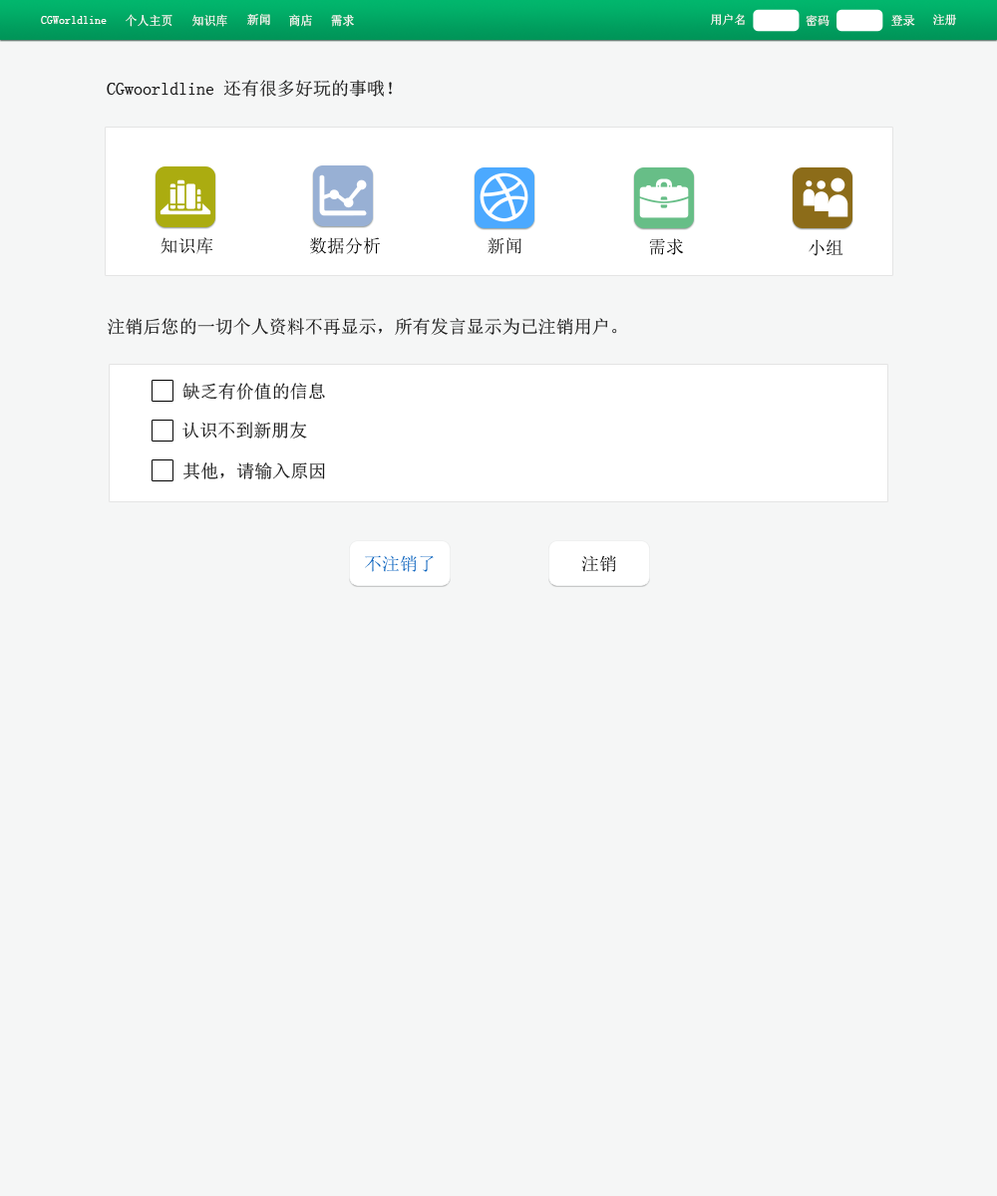
<style>
.page{position:relative;width:997px;height:1196px;background:#f5f6f6}
.page>*{position:absolute;margin:0}
.t1{font:12.4px "SimSun";color:#fdfcfc;scale:0.97 1}
.t2{font:12px "SimSun";color:#fdfcfc}
.t3{font:12px "SimSun";color:#ffffff}
.t4{font:17.9px "SimSun";color:#191919}
.t5{font:17.9px "SimSun";color:#020202}
.t6{font:17.9px "SimSun";color:#0660bd}
</style>
<div class="page">
<p class="t1" style="left:41px;top:16px;width:66px;height:8px">CGWorldline</p>
<p class="t1" style="left:126px;top:14px;width:46px;height:13px">个人主页</p>
<p class="t1" style="left:192px;top:14px;width:35px;height:13px">知识库</p>
<p class="t1" style="left:247px;top:13px;width:23px;height:13px">新闻</p>
<p class="t1" style="left:289px;top:14px;width:23px;height:13px">商店</p>
<p class="t1" style="left:331px;top:14px;width:23px;height:13px">需求</p>
<p class="t2" style="left:711px;top:14px;width:34px;height:12px">用户名</p>
<p class="t2" style="left:805px;top:15px;width:24px;height:11px">密码</p>
<p class="t3" style="left:891px;top:15px;width:24px;height:11px">登录</p>
<p class="t3" style="left:933px;top:14px;width:23px;height:12px">注册</p>
<p class="t4" style="left:107px;top:80px;width:285px;height:17px">CGwoorldline 还有很多好玩的事哦！</p>
<p class="t5" style="left:160px;top:237px;width:53px;height:17px">知识库</p>
<p class="t5" style="left:310px;top:237px;width:70px;height:17px">数据分析</p>
<p class="t5" style="left:487px;top:237px;width:34px;height:17px">新闻</p>
<p class="t5" style="left:649px;top:238px;width:35px;height:17px">需求</p>
<p class="t5" style="left:808px;top:239px;width:35px;height:17px">小组</p>
<p class="t4" style="left:108px;top:318px;width:509px;height:17px">注销后您的一切个人资料不再显示，所有发言显示为已注销用户。</p>
<p class="t4" style="left:182px;top:383px;width:143px;height:17px">缺乏有价值的信息</p>
<p class="t4" style="left:182px;top:422px;width:125px;height:17px">认识不到新朋友</p>
<p class="t4" style="left:183px;top:463px;width:142px;height:16px">其他，请输入原因</p>
<p class="t6" style="left:365px;top:555px;width:69px;height:17px">不注销了</p>
<p class="t5" style="left:581px;top:555px;width:35px;height:17px">注销</p>
</div>
